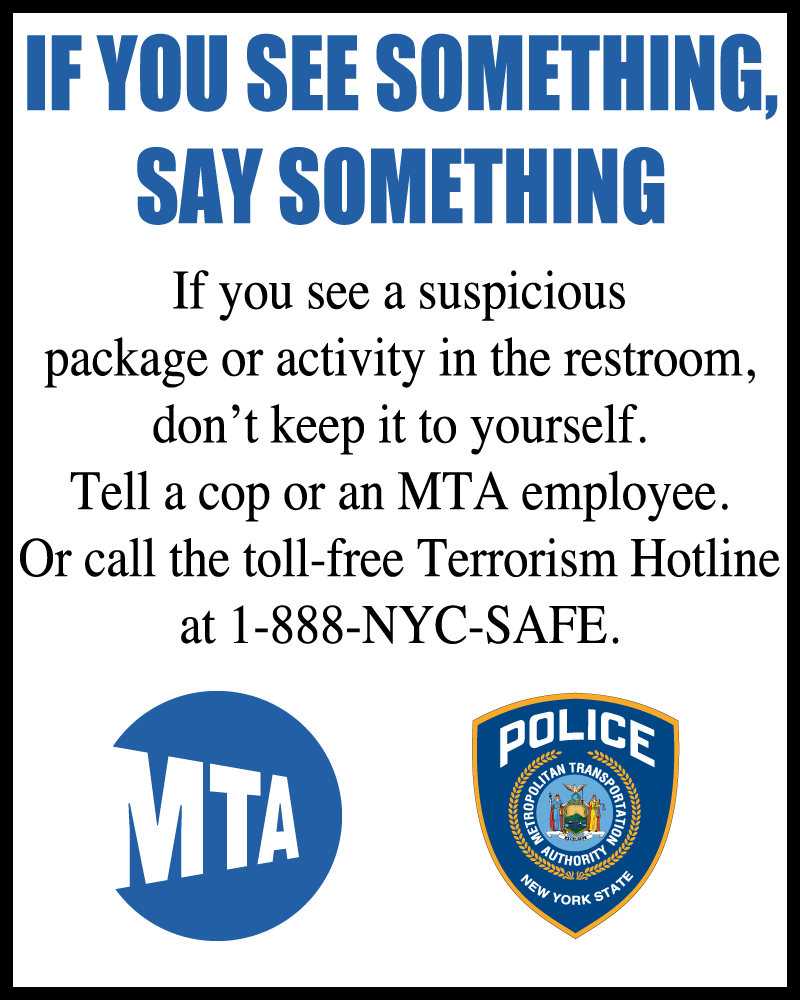
<style>
.page{position:relative;width:800px;height:1000px;background:#ffffff}
.page>*{position:absolute;margin:0}
.t1{font:94.3px "Impact";color:#225fa4;scale:0.9 1}
.t2{font:55.8px "Times-Roman";color:#000000;scale:0.9 1}
</style>
<div class="page">
<p class="t1" style="left:27px;top:33px;width:751px;height:192px;text-align:center">IF YOU SEE SOMETHING,<br>SAY SOMETHING</p>
<p class="t2" style="left:20px;top:270px;width:760px;height:374px;text-align:center">If you see a suspicious<br>package or activity in the restroom,<br>don’t keep it to yourself.<br>Tell a cop or an MTA employee.<br>Or call the toll-free Terrorism Hotline<br>at 1-888-NYC-SAFE.</p>
</div>
